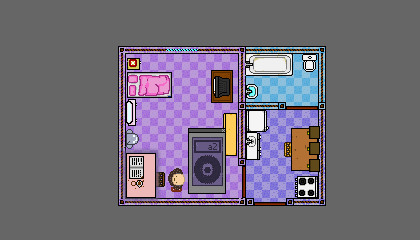
<style>
.page{position:relative;width:420px;height:240px;background:#666666}
.page>*{position:absolute;margin:0}
.t1{font:10px "Tahoma";color:#2f293f}
</style>
<div class="page">
<p class="t1" style="left:208px;top:143px;width:9px;height:7px">a2</p>
</div>
